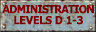
<style>
.page{position:relative;width:96px;height:32px}
.page>*{position:absolute;margin:0}
.t1{font:11px/11px "Verdana-Bold";letter-spacing:-0.08em;color:#7b0000;scale:0.9 1}
.t2{font:11px/11px "Verdana-Bold";letter-spacing:-0.04em;color:#7b0000;scale:0.9 1}
</style>
<div class="page">
<p class="t1" style="left:2px;top:4px;width:92px;height:21px;text-align:center">ADMINISTRATION<br><span class="t2">LEVELS D 1-3</span></p>
</div>
